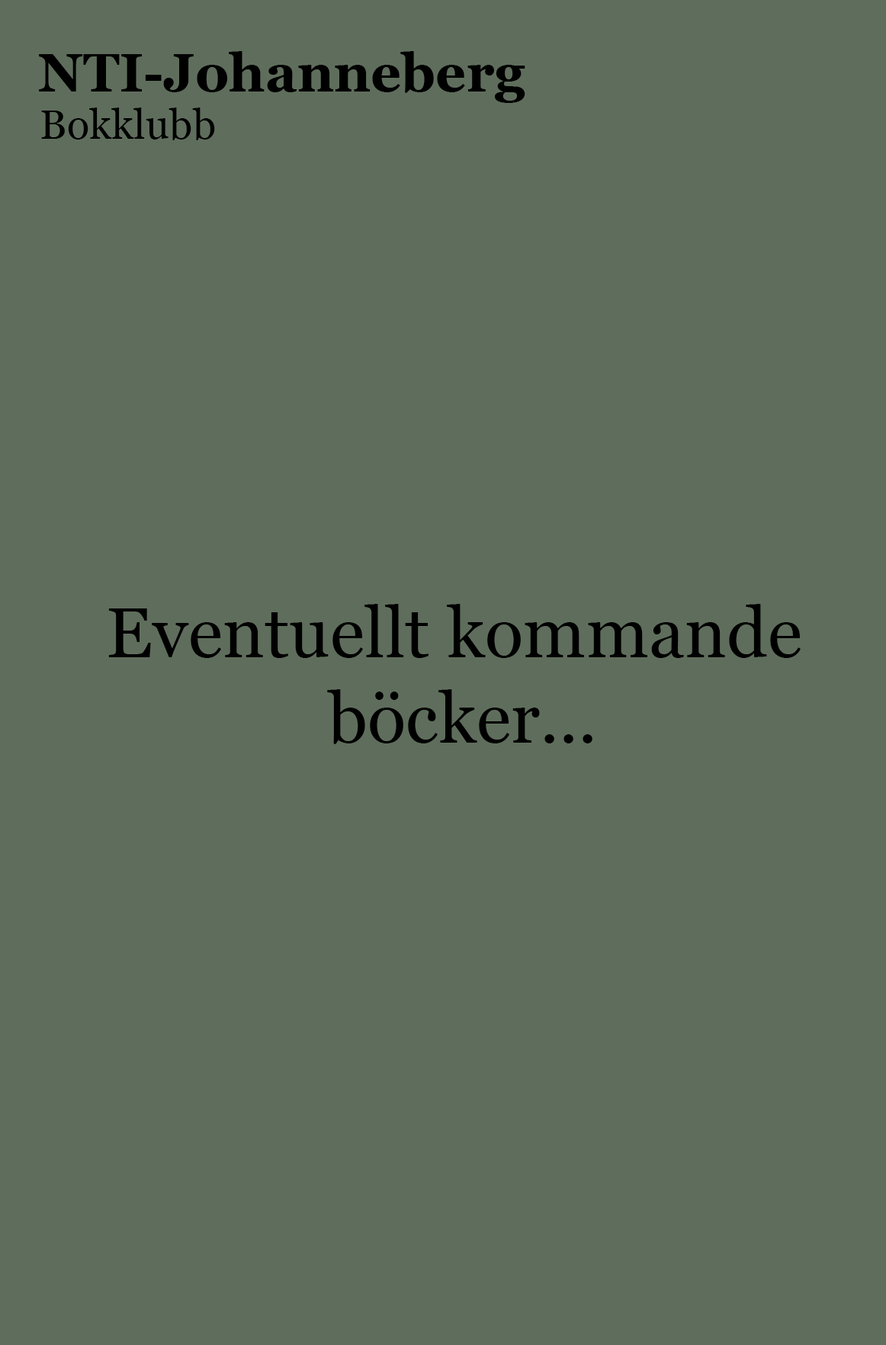
<style>
.page{position:relative;width:886px;height:1345px;background:#5f6e5c}
.page>*{position:absolute;margin:0}
.t1{font:53.4px "Georgia-Bold";color:#000000}
.t2{font:41.5px "Georgia";color:#000000}
.t3{font:71.2px "Georgia";color:#000000}
</style>
<div class="page">
<p class="t1" style="left:39px;top:51px;width:487px;height:52px">NTI-Johanneberg</p>
<p class="t2" style="left:41px;top:108px;width:174px;height:32px">Bokklubb</p>
<p class="t3" style="left:108px;top:604px;width:693px;height:140px;text-align:center">Eventuellt kommande<br> böcker...</p>
</div>
